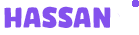
<style>
.page{position:relative;width:139px;height:35px;background:#ffffff}
.page>*{position:absolute;margin:0}
.t1{font:30px "MindBoggleDEMO-Regular";color:#8451ed}
</style>
<div class="page">
<p class="t1" style="left:4px;top:6px;width:107px;height:22px">Hassan</p>
</div>
